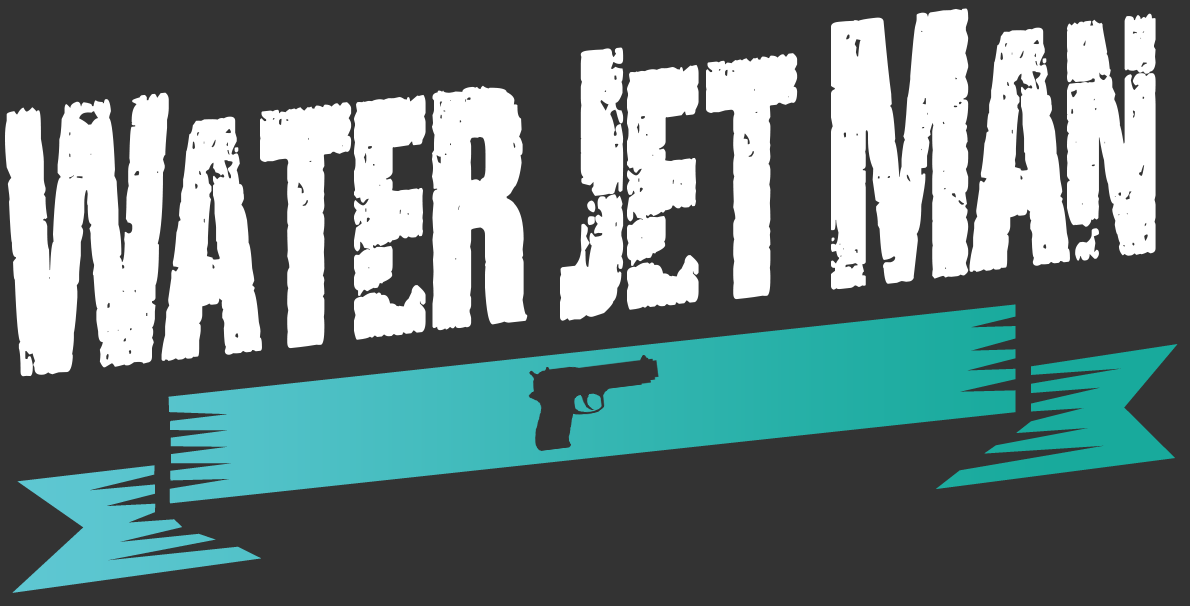
<style>
.page{position:relative;width:1190px;height:606px;background:#333333}
.page>*{position:absolute;margin:0}
.t1{font:282.8px "CiudadPodrida";letter-spacing:-0.13em;color:#ffffff;scale:0.94 1}
.t2{font:318.2px "CiudadPodrida";letter-spacing:-0.13em;color:#ffffff;scale:0.94 1}
</style>
<div class="page">
<p class="t1" style="left:5px;top:8px;width:1151px;height:369px;rotate:-6deg"><span class="t2">W </span>a t e r  <span class="t2">j </span>e t  <span class="t2">m </span>a n</p>
</div>
